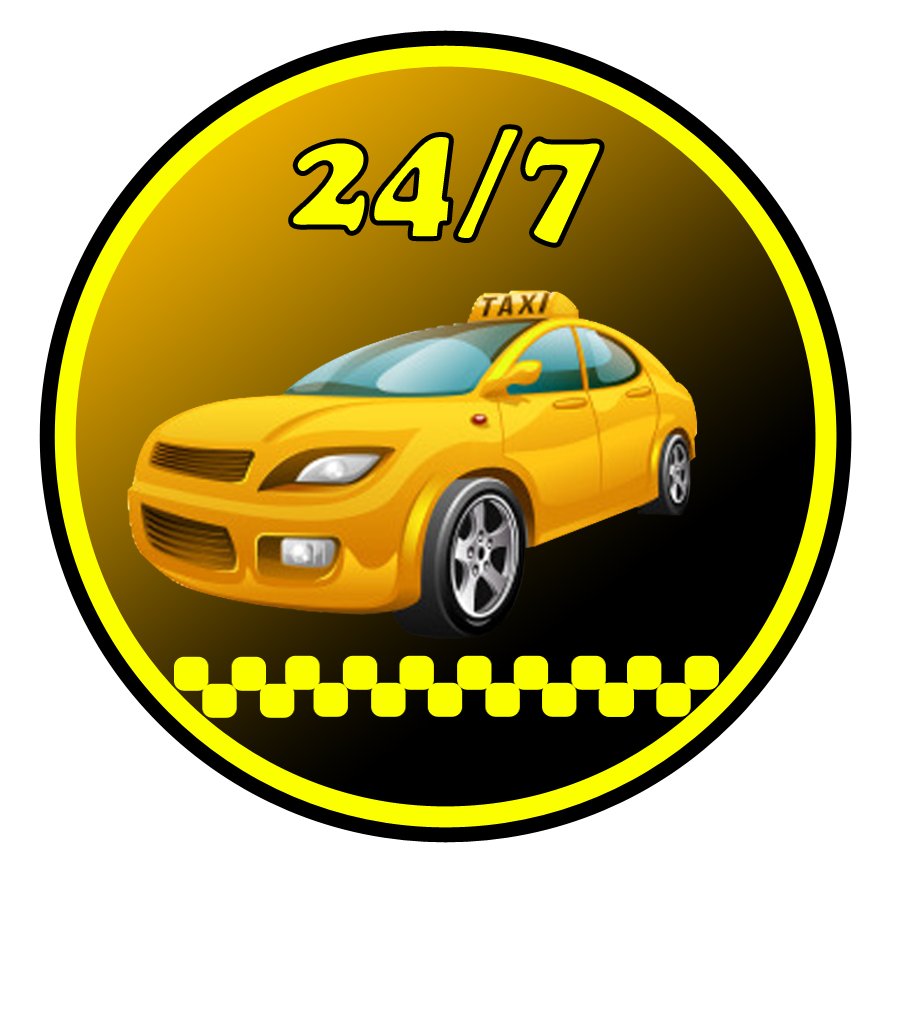
<style>
.page{position:relative;width:922px;height:1017px;background:#ffffff}
.page>*{position:absolute;margin:0}
.t1{font:142.6px "CooperBlackStd-Italic";color:#fcff00}
</style>
<div class="page">
<p class="t1" style="left:290px;top:126px;width:312px;height:120px">24/7</p>
</div>
